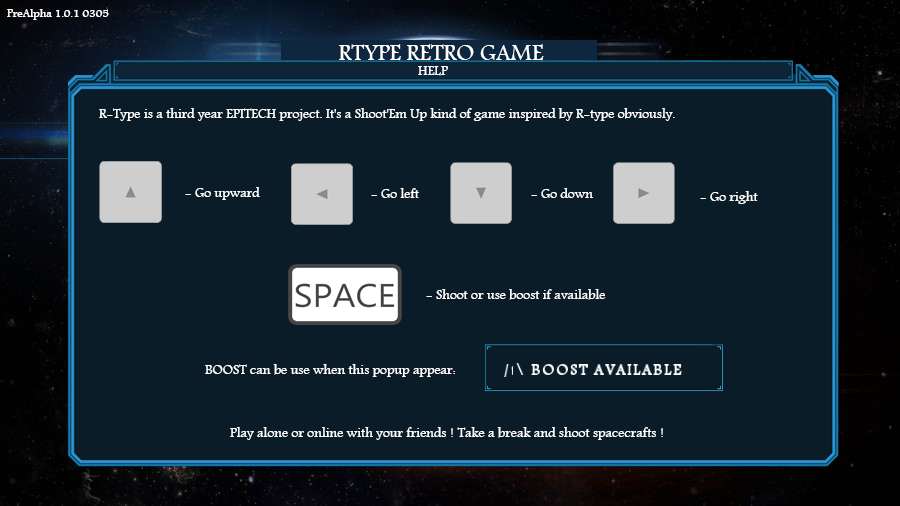
<style>
.page{position:relative;width:900px;height:506px;background:#0a1c27}
.page>*{position:absolute;margin:0}
.t1{font:12px "Andalus";color:#ffffff}
.t2{font:24px "Andalus";color:#ffffff}
.t3{font:14px "Andalus";color:#ffffff}
</style>
<div class="page">
<p class="t1" style="left:7px;top:9px;width:102px;height:11px">PreAlpha 1.0.1 0305</p>
<p class="t2" style="left:339px;top:44px;width:205px;height:17px">RTYPE RETRO GAME</p>
<p class="t3" style="left:418px;top:66px;width:30px;height:10px">HELP</p>
<p class="t3" style="left:99px;top:108px;width:576px;height:13px">R-Type is a third year EPITECH project. It's a Shoot'Em Up kind of game inspired by R-type obviously.</p>
<p class="t3" style="left:185px;top:187px;width:75px;height:13px">- Go upward</p>
<p class="t3" style="left:371px;top:188px;width:48px;height:10px">- Go left</p>
<p class="t3" style="left:531px;top:188px;width:62px;height:10px">- Go down</p>
<p class="t3" style="left:700px;top:191px;width:58px;height:13px">- Go right</p>
<p class="t3" style="left:426px;top:289px;width:180px;height:11px">- Shoot or use boost if available</p>
<p class="t3" style="left:205px;top:364px;width:250px;height:13px">BOOST can be use when this popup appear:</p>
<p class="t3" style="left:230px;top:427px;width:433px;height:13px">Play alone or online with your friends ! Take a break and shoot spacecrafts !</p>
</div>
